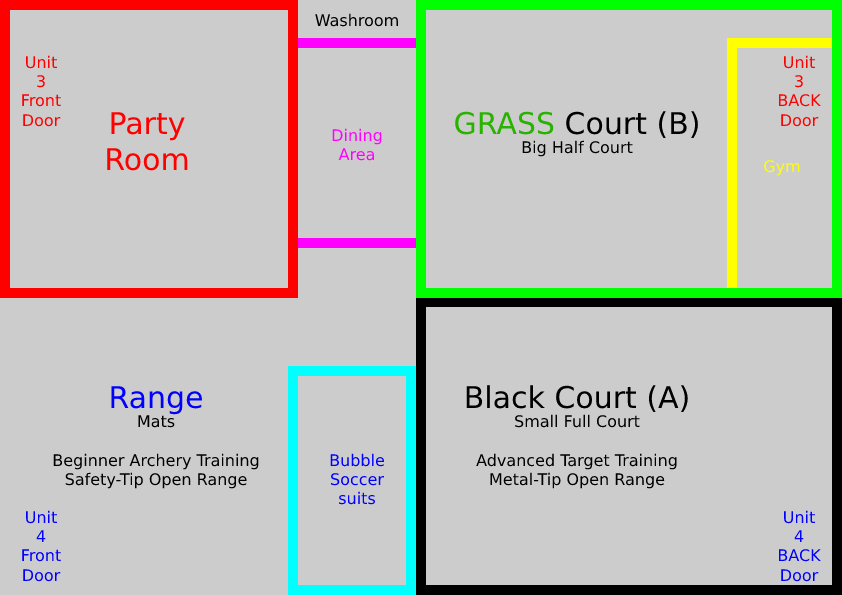
<style>
.page{position:relative;width:842px;height:595px;background:#cccccc}
.page>*{position:absolute;margin:0}
.t1{font:16px "DejaVuSans";color:#000000}
.t2{font:16px "DejaVuSans";color:#ff0000}
.t3{font:30px "DejaVuSans";color:#ff0000}
.t4{font:30px "DejaVuSans";color:#2ab200}
.t5{font:30px "DejaVuSans";color:#000000}
.t6{font:16px "DejaVuSans";color:#ff00ff}
.t7{font:16px "DejaVuSans";color:#ffff00}
.t8{font:30px "DejaVuSans";color:#0000ff}
.t9{font:16px "DejaVuSans";color:#0000ff}
</style>
<div class="page">
<p class="t1" style="left:315px;top:13px;width:83px;height:14px">Washroom</p>
<p class="t2" style="left:22px;top:55px;width:39px;height:72px;text-align:center">Unit<br>3<br>Front<br>Door</p>
<p class="t2" style="left:778px;top:55px;width:43px;height:72px;text-align:center">Unit<br>3<br>BACK<br>Door</p>
<p class="t3" style="left:107px;top:112px;width:81px;height:59px;text-align:center">Party<br>Room</p>
<p class="t1" style="left:455px;top:111px;width:243px;height:46px;text-align:center"><span class="t4">GRASS </span><span class="t5">Court (B)<br></span>Big Half Court</p>
<p class="t6" style="left:332px;top:128px;width:50px;height:33px;text-align:center">Dining<br>Area</p>
<p class="t7" style="left:764px;top:160px;width:36px;height:16px">Gym</p>
<p class="t1" style="left:53px;top:386px;width:206px;height:103px;text-align:center"><span class="t8">Range<br></span>Mats<br><br>Beginner Archery Training<br>Safety-Tip Open Range</p>
<p class="t1" style="left:466px;top:385px;width:222px;height:104px;text-align:center"><span class="t5">Black Court (A)<br></span>Small Full Court<br><br>Advanced Target Training<br>Metal-Tip Open Range</p>
<p class="t9" style="left:330px;top:453px;width:55px;height:52px;text-align:center">Bubble<br>Soccer<br>suits</p>
<p class="t9" style="left:22px;top:510px;width:39px;height:72px;text-align:center">Unit<br>4<br>Front<br>Door</p>
<p class="t9" style="left:778px;top:510px;width:43px;height:72px;text-align:center">Unit<br>4<br>BACK<br>Door</p>
</div>
